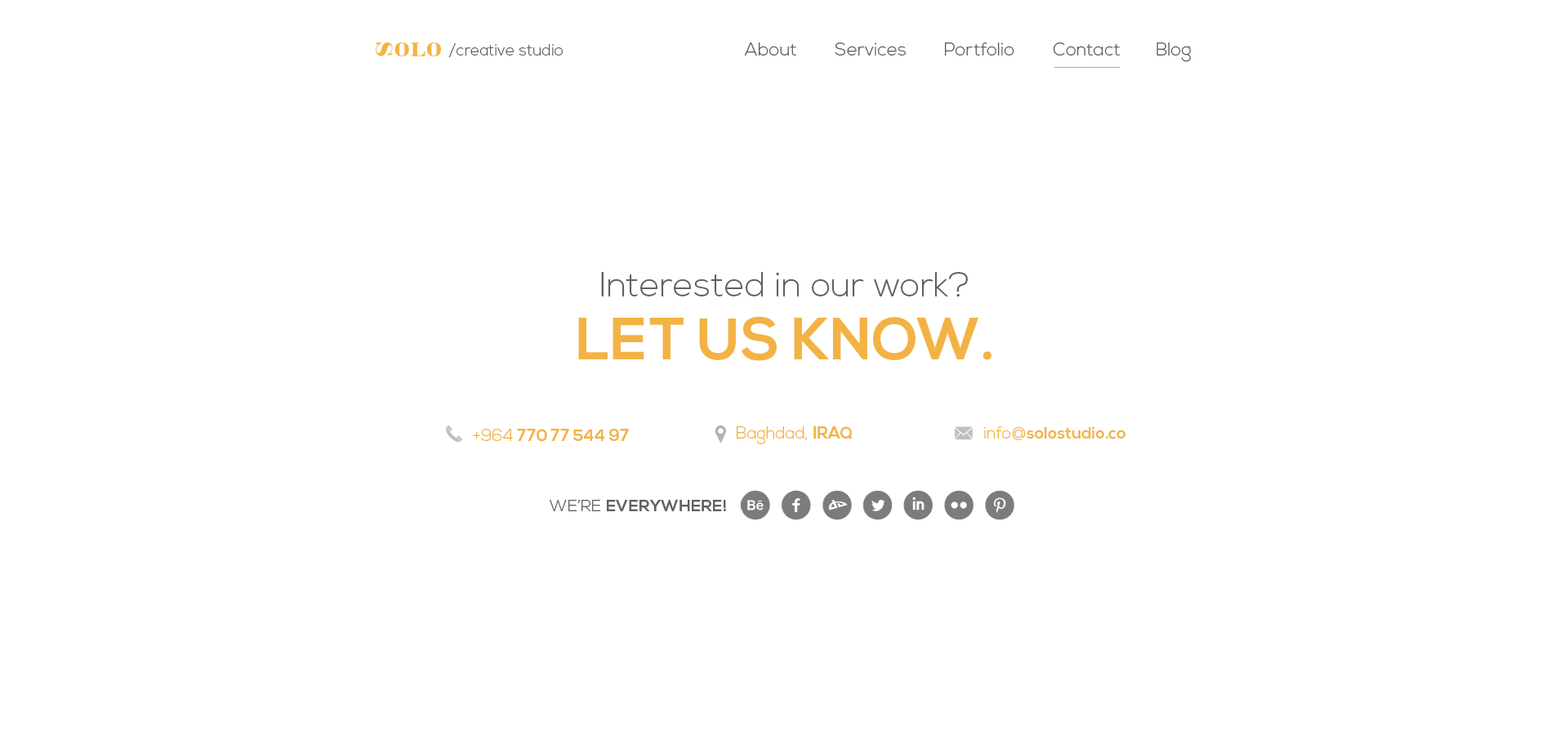
<style>
.page{position:relative;width:1568px;height:735px;background:#ffffff}
.page>*{position:absolute;margin:0}
.t1{font:15.7px "NexaLight";color:#616161}
.t2{font:18.2px "NexaLight";color:#616161}
.t3{font:34.3px/43.3px "NexaLight";color:#616161}
.t4{font:58.8px/62.9px "NexaBold";color:#f3b344}
.t5{font:16.6px "NexaBold";color:#f3b344}
.t6{font:16.6px "NexaLight";color:#f3b344}
.t7{font:16.3px "NexaBold";color:#616161}
.t8{font:16.3px "NexaLight";color:#616161}
</style>
<div class="page">
<p class="t1" style="left:448px;top:43px;width:115px;height:14px">/creative studio</p>
<p class="t2" style="left:744px;top:42px;width:52px;height:14px">About</p>
<p class="t2" style="left:835px;top:42px;width:71px;height:14px">Services</p>
<p class="t2" style="left:945px;top:42px;width:69px;height:14px">Portfolio</p>
<p class="t2" style="left:1054px;top:42px;width:66px;height:14px">Contact</p>
<p class="t2" style="left:1156px;top:42px;width:35px;height:20px">Blog</p>
<p class="t3" style="left:578px;top:272px;width:413px;height:89px;text-align:center">Interested in our work?<br><span class="t4">LET US KNOW.</span></p>
<p class="t5" style="left:473px;top:429px;width:156px;height:13px"><span class="t6">+964 </span>770 77 544 97</p>
<p class="t6" style="left:737px;top:426px;width:116px;height:18px">Baghdad, <span class="t5">IRAQ</span></p>
<p class="t5" style="left:984px;top:426px;width:141px;height:14px"><span class="t6">info@</span>solostudio.co</p>
<p class="t7" style="left:550px;top:500px;width:176px;height:12px"><span class="t8">WE’RE </span>EVERYWHERE!</p>
</div>
